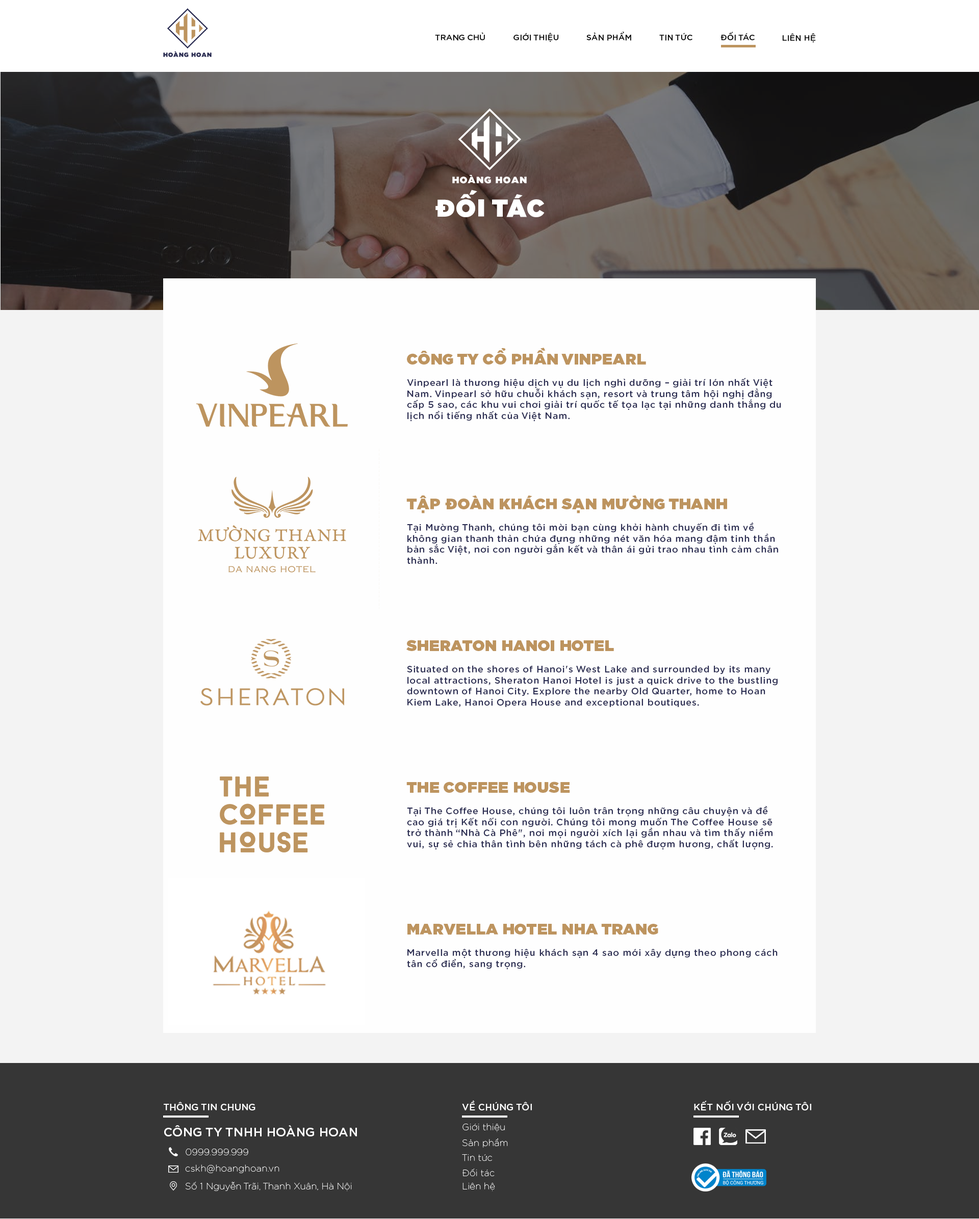
<style>
.page{position:relative;width:979px;height:1219px;background:#fefefe}
.page>*{position:absolute;margin:0}
.t1{font:8.2px "iCielGotham-Medium";color:#000000;text-transform:uppercase}
.t2{font:24.5px "iCielGotham-Ultra";letter-spacing:0.05em;color:#ffffff;text-transform:uppercase}
.t3{font:15.3px "iCielGotham-Ultra";letter-spacing:0.025em;color:#bd945f;text-transform:uppercase}
.t4{font:9.2px "iCielGotham-Medium";letter-spacing:0.05em;color:#2c2e53}
.t5{font:9.2px "iCielGotham-Medium";letter-spacing:0.025em;color:#ffffff}
.t6{font:12.2px "iCielGotham-Medium";letter-spacing:0.025em;color:#ffffff}
.t7{font:9.2px "iCielGotham-Thin";letter-spacing:0.025em;color:#ffffff}
</style>
<div class="page">
<p class="t1" style="left:435px;top:32px;width:50px;height:9px">trang chủ</p>
<p class="t1" style="left:513px;top:33px;width:46px;height:9px">gIớI thIệu</p>
<p class="t1" style="left:586px;top:32px;width:45px;height:9px">sản phẩm</p>
<p class="t1" style="left:659px;top:33px;width:33px;height:8px">tIn tức</p>
<p class="t1" style="left:720px;top:32px;width:34px;height:9px">đốI tác</p>
<p class="t1" style="left:782px;top:33px;width:33px;height:10px">lIên hệ</p>
<p class="t2" style="left:435px;top:190px;width:109px;height:27px">đốI tác</p>
<p class="t3" style="left:407px;top:348px;width:239px;height:17px">Công ty cổ phần VInpearl</p>
<p class="t4" style="left:407px;top:378px;width:374px;height:43px">Vinpearl là thương hiệu dịch vụ du lịch nghỉ dưỡng – giải trí lớn nhất Việt Nam. Vinpearl sở hữu chuỗi khách sạn, resort và trung tâm hội nghị đẳng cấp 5 sao, các khu vui chơi giải trí quốc tế tọa lạc tại những danh thắng du lịch nổi tiếng nhất của Việt Nam.</p>
<p class="t3" style="left:406px;top:495px;width:321px;height:18px">TẬP ĐOÀN KHÁCH SẠN MƯỜNG THANH</p>
<p class="t4" style="left:407px;top:522px;width:371px;height:42px">Tại Mường Thanh, chúng tôi mời bạn cùng khởi hành chuyến đi tìm về không gian thanh thản chứa đựng những nét văn hóa mang đậm tinh thần bản sắc Việt, nơi con người gắn kết và thân ái gửi trao nhau tình cảm chân thành.</p>
<p class="t3" style="left:406px;top:640px;width:208px;height:11px">sheraton hanoI HOTEL</p>
<p class="t4" style="left:407px;top:665px;width:370px;height:42px">Situated on the shores of Hanoi's West Lake and surrounded by its many local attractions, Sheraton Hanoi Hotel is just a quick drive to the bustling downtown of Hanoi City. Explore the nearby Old Quarter, home to Hoan Kiem Lake, Hanoi Opera House and exceptional boutiques.</p>
<p class="t3" style="left:406px;top:781px;width:164px;height:12px">THE COFFEE HOUSE</p>
<p class="t4" style="left:407px;top:805px;width:366px;height:44px">Tại The Coffee House, chúng tôi luôn trân trọng những câu chuyện và đề cao giá trị Kết nối con người. Chúng tôi mong muốn The Coffee House sẽ trở thành “Nhà Cà Phê", nơi mọi người xích lại gần nhau và tìm thấy niềm vui, sự sẻ chia thân tình bên những tách cà phê đượm hương, chất lượng.</p>
<p class="t3" style="left:407px;top:923px;width:251px;height:12px">Marvella Hotel Nha Trang</p>
<p class="t4" style="left:407px;top:948px;width:370px;height:21px">Marvella một thương hiệu khách sạn 4 sao mới xây dựng theo phong cách tân cổ điển, sang trọng.</p>
<p class="t5" style="left:164px;top:1101px;width:91px;height:10px">THÔNG TIN CHUNG</p>
<p class="t5" style="left:462px;top:1100px;width:70px;height:11px">VỀ CHÚNG TÔI</p>
<p class="t5" style="left:694px;top:1100px;width:117px;height:11px">KẾT NỐI VỚI CHÚNG TÔI</p>
<p class="t6" style="left:164px;top:1125px;width:193px;height:11px">CÔNG TY TNHH HOÀNG HOAN</p>
<p class="t7" style="left:462px;top:1123px;width:43px;height:8px">Giới thiệu</p>
<p class="t7" style="left:462px;top:1138px;width:46px;height:9px">Sản phẩm</p>
<p class="t7" style="left:186px;top:1148px;width:62px;height:7px">0999.999.999</p>
<p class="t7" style="left:462px;top:1154px;width:30px;height:7px">Tin tức</p>
<p class="t7" style="left:185px;top:1164px;width:94px;height:9px">cskh@hoanghoan.vn</p>
<p class="t7" style="left:462px;top:1168px;width:32px;height:8px">Đối tác</p>
<p class="t7" style="left:186px;top:1181px;width:166px;height:10px">Số 1 Nguyễn Trãi, Thanh Xuân, Hà Nội</p>
<p class="t7" style="left:462px;top:1182px;width:33px;height:9px">Liên hệ</p>
</div>
